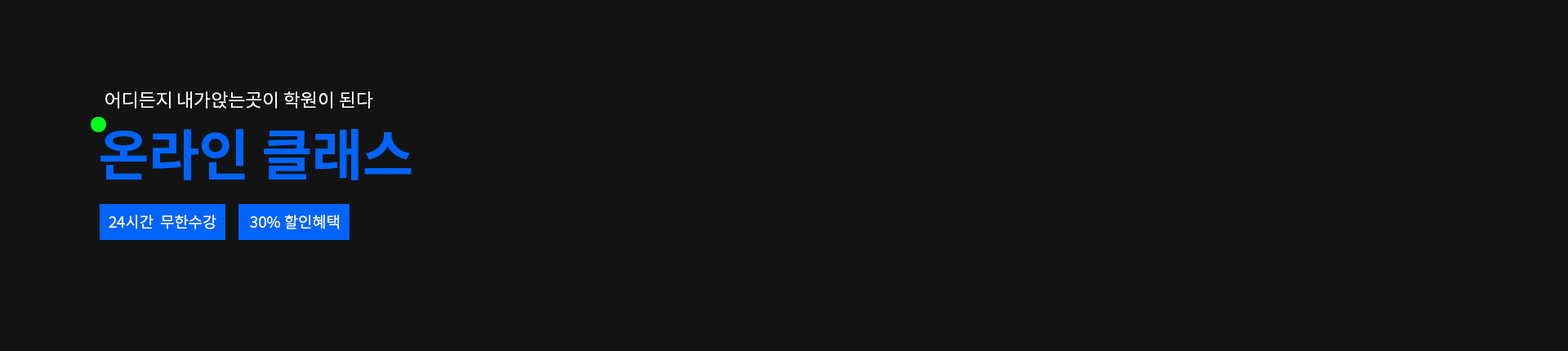
<style>
.page{position:relative;width:1568px;height:351px;background:#131313}
.page>*{position:absolute;margin:0}
.t1{font:18.8px "NotoSansKR-Regular";letter-spacing:-0.01em;color:#ffffff}
.t2{font:55.5px "NotoSansKR-Bold";letter-spacing:-0.01em;color:#0064fb}
.t3{font:15.5px "NotoSansKR-Regular";letter-spacing:-0.01em;color:#ffffff}
</style>
<div class="page">
<p class="t1" style="left:105px;top:91px;width:268px;height:18px">어디든지 내가앉는곳이 학원이 된다</p>
<p class="t2" style="left:100px;top:129px;width:312px;height:51px">온라인 클래스</p>
<p class="t3" style="left:109px;top:215px;width:107px;height:14px">24시간  무한수강</p>
<p class="t3" style="left:250px;top:215px;width:89px;height:14px">30% 할인혜택</p>
</div>
